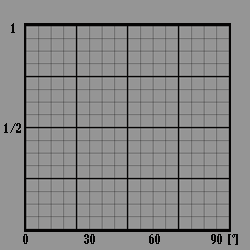
<style>
.page{position:relative;width:250px;height:250px;background:#959595}
.page>*{position:absolute;margin:0}
.t1{font:12px "BernardMT-Condensed";letter-spacing:0.05em;color:#040404}
</style>
<div class="page">
<p class="t1" style="left:11px;top:23px;width:4px;height:10px">1</p>
<p class="t1" style="left:4px;top:123px;width:17px;height:10px">1/2</p>
<p class="t1" style="left:23px;top:234px;width:5px;height:10px">0</p>
<p class="t1" style="left:84px;top:234px;width:11px;height:10px">30</p>
<p class="t1" style="left:149px;top:234px;width:11px;height:10px">60</p>
<p class="t1" style="left:211px;top:234px;width:11px;height:10px">90</p>
<p class="t1" style="left:228px;top:234px;width:10px;height:11px">[°]</p>
</div>
